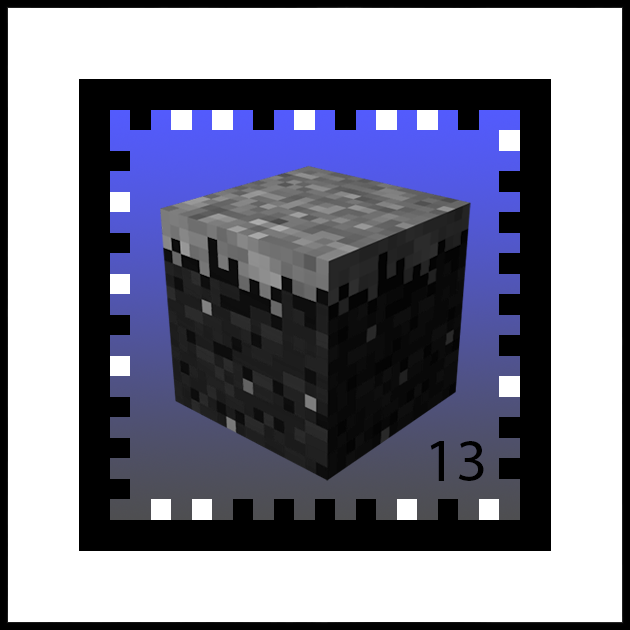
<style>
.page{position:relative;width:630px;height:630px;background:#ffffff}
.page>*{position:absolute;margin:0}
.t1{font:61.1px "MyriadPro-Regular";color:#000000;font-variant:small-caps}
</style>
<div class="page">
<p class="t1" style="left:430px;top:441px;width:54px;height:40px">13</p>
</div>
